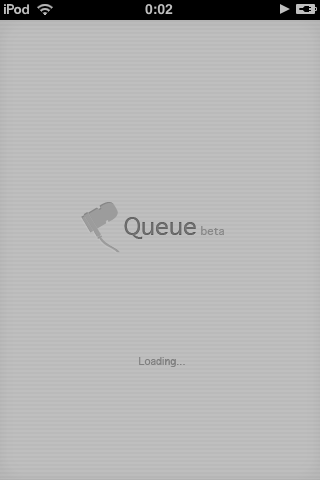
<style>
.page{position:relative;width:320px;height:480px;background:#bababa}
.page>*{position:absolute;margin:0}
.t1{font:24px "Geneva";color:#7e7e7e}
.t2{font:11px "Geneva";color:#878787}
.t3{font:10px "Geneva";color:#7e7e7e}
</style>
<div class="page">
<p class="t1" style="left:124px;top:217px;width:72px;height:22px">Queue</p>
<p class="t2" style="left:201px;top:226px;width:23px;height:9px">beta</p>
<p class="t3" style="left:139px;top:357px;width:46px;height:10px">Loading...</p>
</div>
